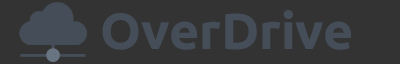
<style>
.page{position:relative;width:400px;height:64px;background:#333333}
.page>*{position:absolute;margin:0}
.t1{font:50.7px "Ubuntu-Bold";color:#444d58}
</style>
<div class="page">
<p class="t1" style="left:102px;top:10px;width:249px;height:40px">OverDrive</p>
</div>
